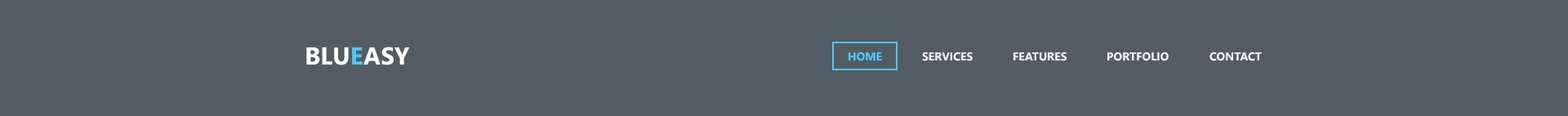
<style>
.page{position:relative;width:1568px;height:116px;background:#535c62}
.page>*{position:absolute;margin:0}
.t1{font:24.5px "SegoeUI-Bold";color:#ffffff;text-transform:uppercase}
.t2{font:24.5px "SegoeUI-Bold";color:#4bcaff;text-transform:uppercase}
.t3{font:11.4px "SegoeUI-Bold";color:#4bcaff;text-transform:uppercase}
.t4{font:11.4px "SegoeUI-Bold";color:#ffffff;text-transform:uppercase}
</style>
<div class="page">
<p class="t1" style="left:306px;top:47px;width:104px;height:18px">blu<span class="t2">e</span>asy</p>
<p class="t3" style="left:849px;top:52px;width:33px;height:9px">home</p>
<p class="t4" style="left:922px;top:52px;width:51px;height:9px;opacity:0.9">services</p>
<p class="t4" style="left:1013px;top:52px;width:54px;height:9px;opacity:0.9">features</p>
<p class="t4" style="left:1107px;top:52px;width:62px;height:9px;opacity:0.9">portfolio</p>
<p class="t4" style="left:1209px;top:52px;width:53px;height:9px;opacity:0.9">contact</p>
</div>
